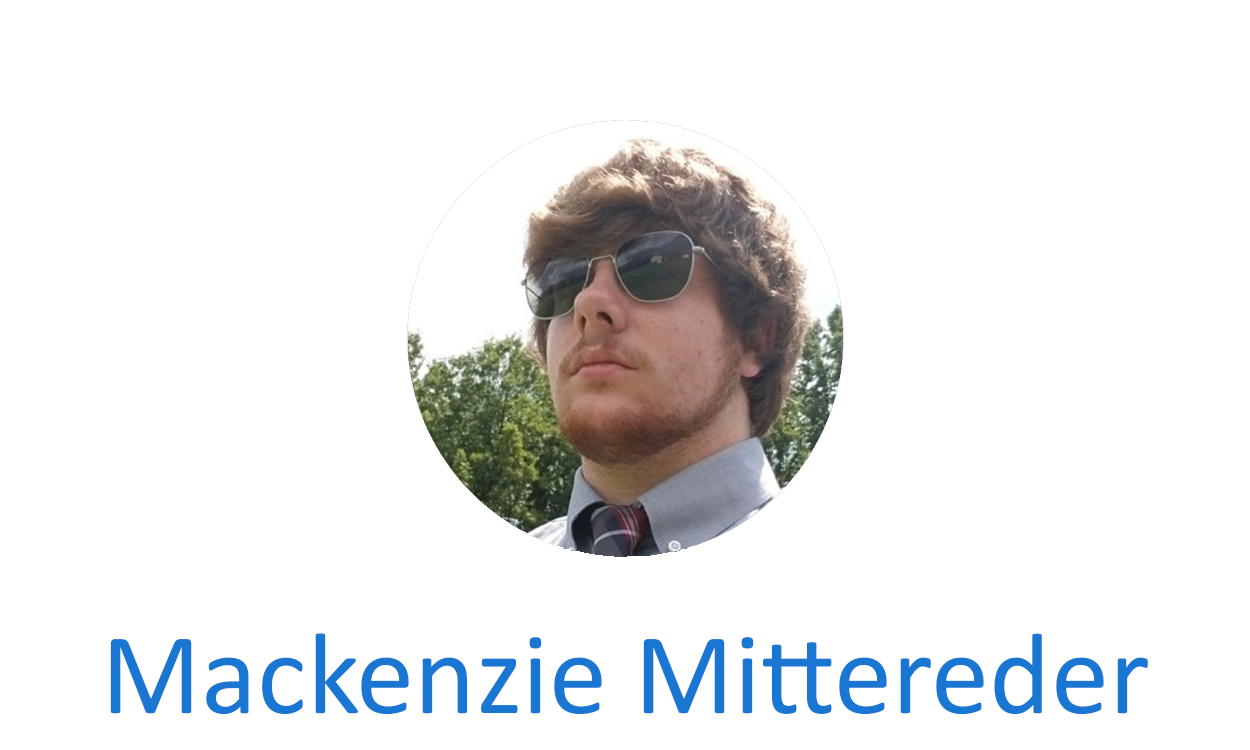
<style>
.page{position:relative;width:1250px;height:750px;background:#ffffff}
.page>*{position:absolute;margin:0}
.t1{font:117px "Calibri";color:#1976d2}
</style>
<div class="page">
<p class="t1" style="left:110px;top:633px;width:1038px;height:82px">Mackenzie Mittereder</p>
</div>
